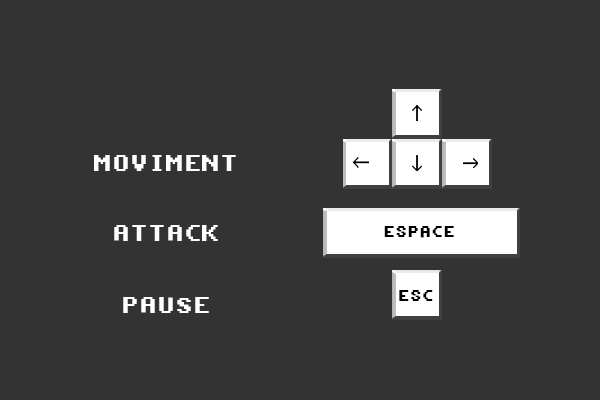
<style>
.page{position:relative;width:600px;height:400px;background:#333333}
.page>*{position:absolute;margin:0}
.t1{font:18px "AmigaForever";color:#fffefe}
.t2{font:12px "AmigaForever";color:#000000}
</style>
<div class="page">
<p class="t1" style="left:94px;top:155px;width:142px;height:16px">MOVIMENT</p>
<p class="t1" style="left:114px;top:225px;width:104px;height:16px">ATTACK</p>
<p class="t2" style="left:384px;top:226px;width:70px;height:12px">ESPACE</p>
<p class="t2" style="left:399px;top:290px;width:34px;height:11px">ESC</p>
<p class="t1" style="left:123px;top:297px;width:86px;height:16px">PAUSE</p>
</div>
